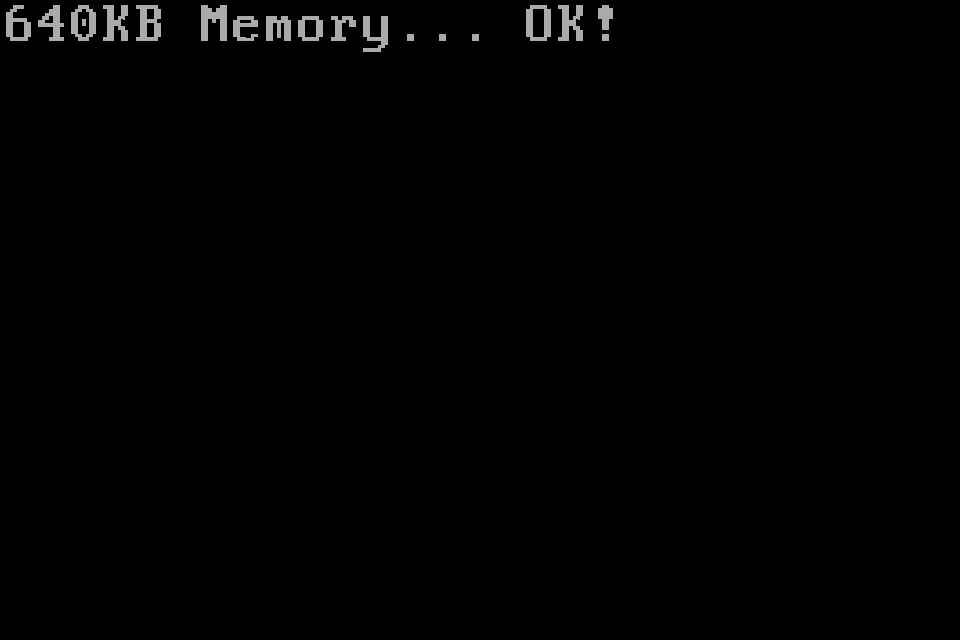
<style>
.page{position:relative;width:960px;height:640px;background:#000000}
.page>*{position:absolute;margin:0}
.t1{font:57.8px "PerfectDOSVGA437Win";color:#aaaaaa}
</style>
<div class="page">
<p class="t1" style="left:6px;top:5px;width:607px;height:47px">640KB Memory... OK!</p>
</div>
